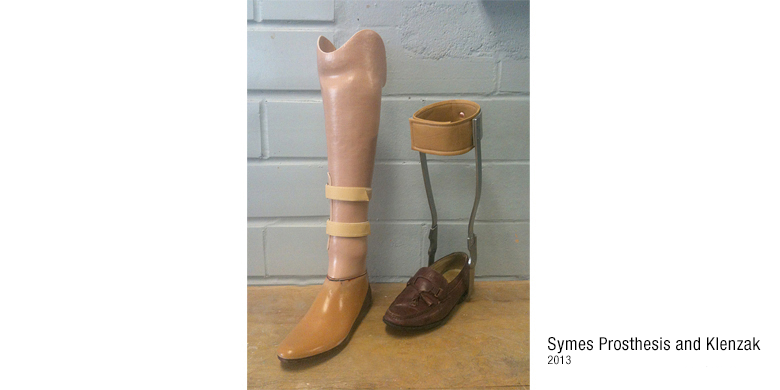
<style>
.page{position:relative;width:780px;height:390px;background:#ffffff}
.page>*{position:absolute;margin:0}
.t1{font:18px/14px "HelveticaNeueLTStd-Cn";letter-spacing:0.02em;color:#000000}
.t2{font:12px/14px "HelveticaNeueLTStd-Cn";letter-spacing:0.02em;color:#000000}
</style>
<div class="page">
<p class="t1" style="left:548px;top:337px;width:213px;height:28px">Symes Prosthesis and Klenzak<br><span class="t2">2013</span></p>
</div>
